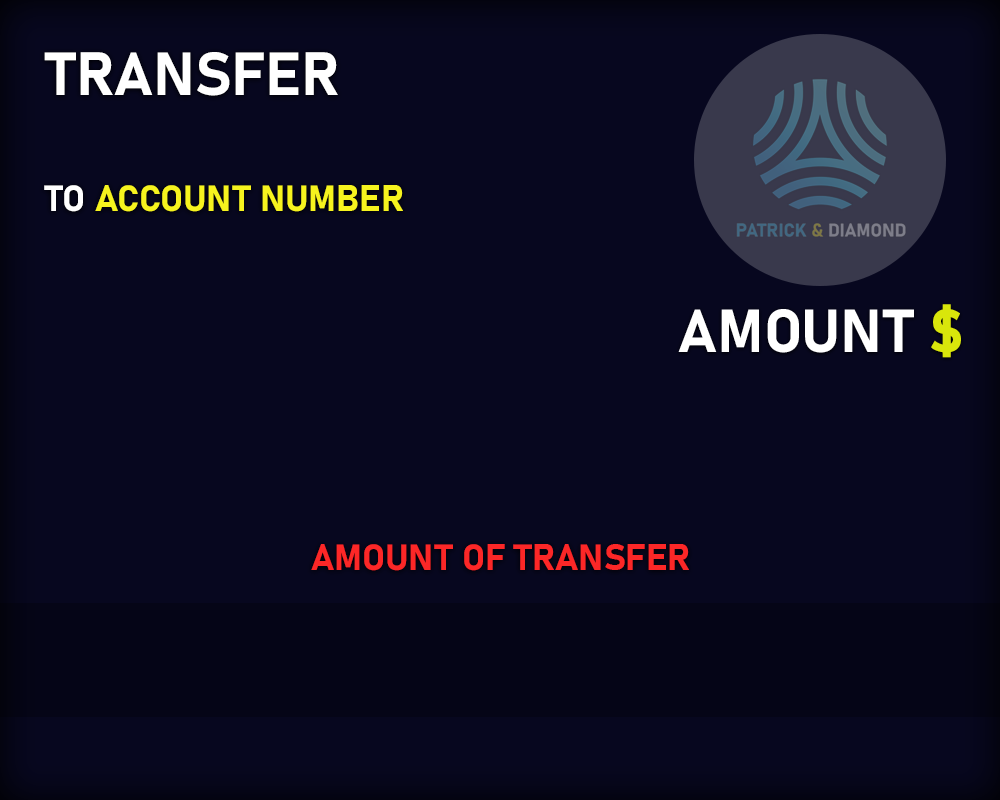
<style>
.page{position:relative;width:1000px;height:800px;background:#07071f}
.page>*{position:absolute;margin:0}
.t1{font:60px "Bahnschrift-Bold";color:#ffffff}
.t2{font:36px "Bahnschrift-Bold";color:#f6f31e}
.t3{font:36px "Bahnschrift-Bold";color:#ffffff}
.t4{font:36px "Bahnschrift-Bold";color:#fc2727}
</style>
<div class="page">
<p class="t1" style="left:44px;top:52px;width:294px;height:44px">TRANSFER</p>
<p class="t2" style="left:44px;top:185px;width:359px;height:27px"><span class="t3">TO </span>ACCOUNT NUMBER</p>
<p class="t4" style="left:311px;top:544px;width:378px;height:27px">AMOUNT OF TRANSFER</p>
</div>
